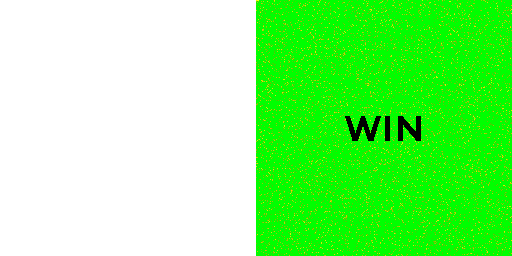
<style>
.page{position:relative;width:512px;height:256px;background:#ffffff}
.page>*{position:absolute;margin:0}
.t1{font:36px "FuturaPT-Heavy";letter-spacing:0.05em;color:#000000}
</style>
<div class="page">
<p class="t1" style="left:345px;top:116px;width:76px;height:25px">WIN</p>
</div>
